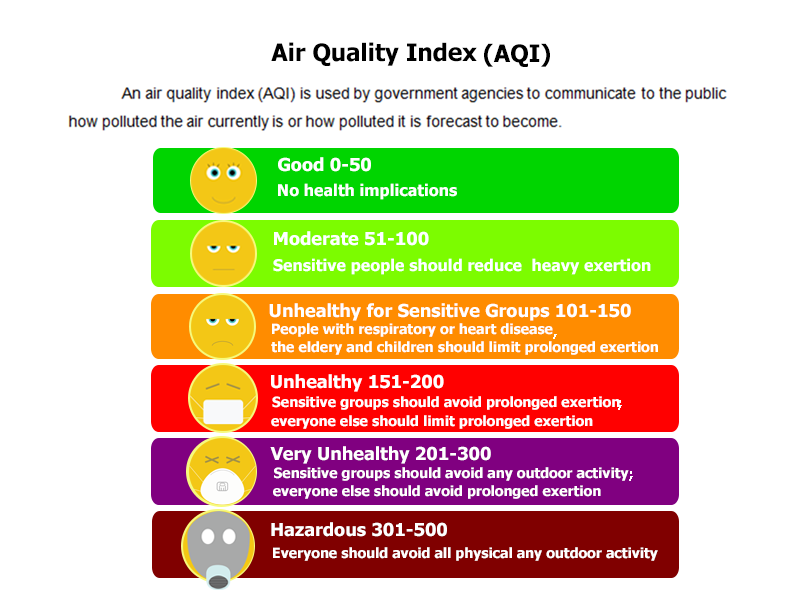
<style>
.page{position:relative;width:800px;height:600px;background:#ffffff}
.page>*{position:absolute;margin:0}
.t1{font:24px "Tahoma-Bold";color:#000000}
.t2{font:18px "Tahoma-Bold";color:#ffffff}
.t3{font:16px "Tahoma-Bold";color:#ffffff}
.t4{font:14px "Tahoma-Bold";color:#ffffff}
</style>
<div class="page">
<p class="t1" style="left:271px;top:42px;width:206px;height:24px">Air Quality Index</p>
<p class="t1" style="left:484px;top:43px;width:66px;height:24px">(AQI)</p>
<p class="t2" style="left:278px;top:157px;width:93px;height:15px">0-50 Good</p>
<p class="t3" style="left:278px;top:183px;width:179px;height:17px">No health implications</p>
<p class="t2" style="left:274px;top:231px;width:155px;height:15px">51-100 Moderate</p>
<p class="t3" style="left:273px;top:258px;width:378px;height:17px">Sensitive people should reduce  heavy exertion</p>
<p class="t2" style="left:269px;top:303px;width:362px;height:18px">101-150 Unhealthy for Sensitive Groups</p>
<p class="t4" style="left:272px;top:323px;width:281px;height:14px">People with respiratory or heart disease</p>
<p class="t4" style="left:271px;top:341px;width:387px;height:14px">the eldery and children should limit prolonged exertion</p>
<p class="t4" style="left:553px;top:334px;width:4px;height:5px">,</p>
<p class="t2" style="left:271px;top:374px;width:173px;height:18px">151-200 Unhealthy</p>
<p class="t4" style="left:272px;top:396px;width:348px;height:14px">Sensitive groups should avoid prolonged exertion</p>
<p class="t4" style="left:618px;top:400px;width:4px;height:10px">;</p>
<p class="t4" style="left:271px;top:415px;width:322px;height:14px">everyone else should limit prolonged exertion</p>
<p class="t2" style="left:270px;top:446px;width:221px;height:18px">201-300 Very Unhealthy</p>
<p class="t4" style="left:274px;top:467px;width:355px;height:14px">Sensitive groups should avoid any outdoor activity</p>
<p class="t4" style="left:629px;top:471px;width:4px;height:10px">;</p>
<p class="t4" style="left:273px;top:485px;width:328px;height:14px">everyone else should avoid prolonged exertion</p>
<p class="t2" style="left:271px;top:522px;width:176px;height:15px">301-500 Hazardous</p>
<p class="t4" style="left:273px;top:547px;width:385px;height:14px">Everyone should avoid all physical any outdoor activity</p>
</div>
